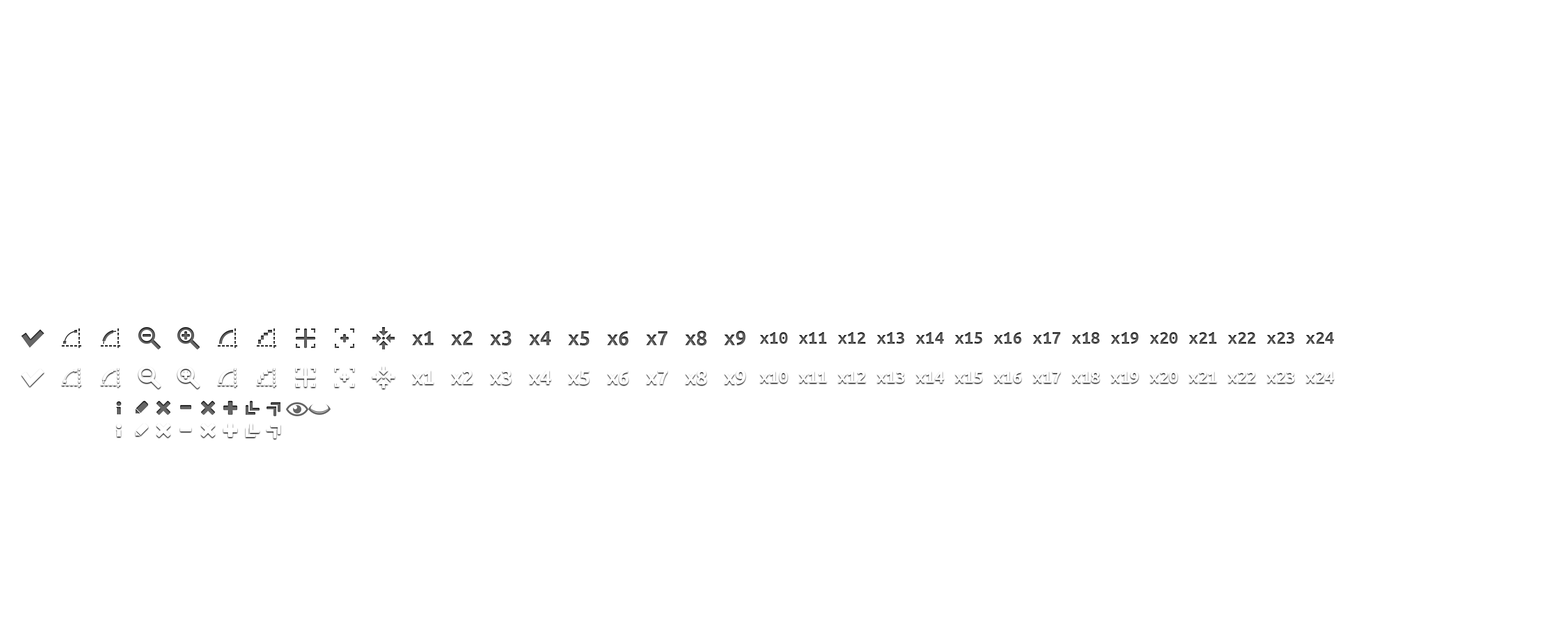
<style>
.page{position:relative;width:1568px;height:638px;background:#ffffff}
.page>*{position:absolute;margin:0}
.t1{font:22.8px "UbuntuMonoDerivativePowerline-Bold";color:#585858}
.t2{font:19px "UbuntuMonoDerivativePowerline-Bold"}
</style>
<div class="page">
<p class="t1" style="left:412px;top:331px;width:334px;height:15px">x1 x2 x3 x4 x5 x6 x7 x8 x9</p>
<p class="t2" style="left:760px;top:332px;width:574px;height:12px">x10 x11 x12 x13 x14 x15 x16 x17 x18 x19 x20 x21 x22 x23 x24</p>
</div>
